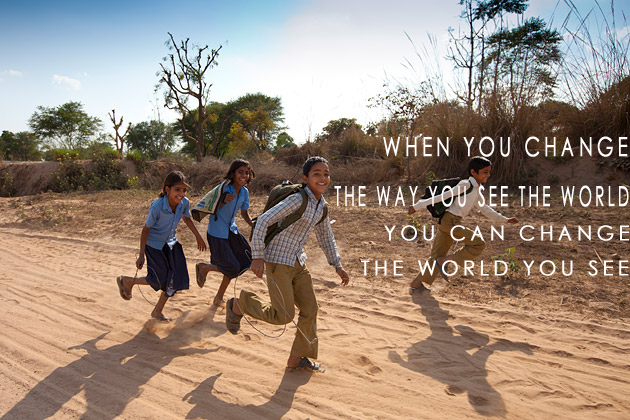
<style>
.page{position:relative;width:630px;height:420px}
.page>*{position:absolute;margin:0}
.t1{font:25.9px "CenturyGothic";letter-spacing:0.18em;color:#fffdfd;font-weight:bold;scale:0.74 1}
.t2{font:27.5px "CenturyGothic";letter-spacing:0.18em;color:#fffdfd;font-weight:bold;scale:0.56 1}
.t3{font:20.4px "CenturyGothic";letter-spacing:0.18em;color:#ffffff;font-weight:bold}
</style>
<div class="page">
<p class="t1" style="left:383px;top:136px;width:245px;height:21px">WHEN YOU CHANGE</p>
<p class="t2" style="left:334px;top:185px;width:295px;height:22px">THE WAY YOU SEE THE WORLD</p>
<p class="t3" style="left:384px;top:225px;width:245px;height:16px">YOU CAN CHANGE</p>
<p class="t3" style="left:361px;top:260px;width:268px;height:16px">THE WORLD YOU SEE</p>
</div>
